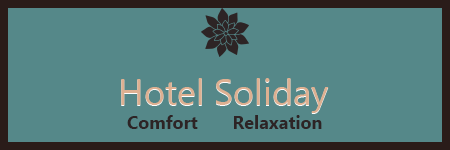
<style>
.page{position:relative;width:450px;height:150px;background:#558889}
.page>*{position:absolute;margin:0}
.t1{font:36px "Gadugi";color:#ddb091}
.t2{font:18px "Gadugi-Bold";color:#2d2425}
</style>
<div class="page">
<p class="t1" style="left:121px;top:78px;width:208px;height:35px">Hotel Soliday</p>
<p class="t2" style="left:127px;top:115px;width:195px;height:14px">Comfort       Relaxation</p>
</div>
